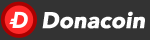
<style>
.page{position:relative;width:150px;height:40px;background:#333333}
.page>*{position:absolute;margin:0}
.t1{font:22.5px "Avenir-BlackOblique";color:#ffffff;font-weight:bold}
</style>
<div class="page">
<p class="t1" style="left:42px;top:11px;width:103px;height:18px">Donacoin</p>
</div>
